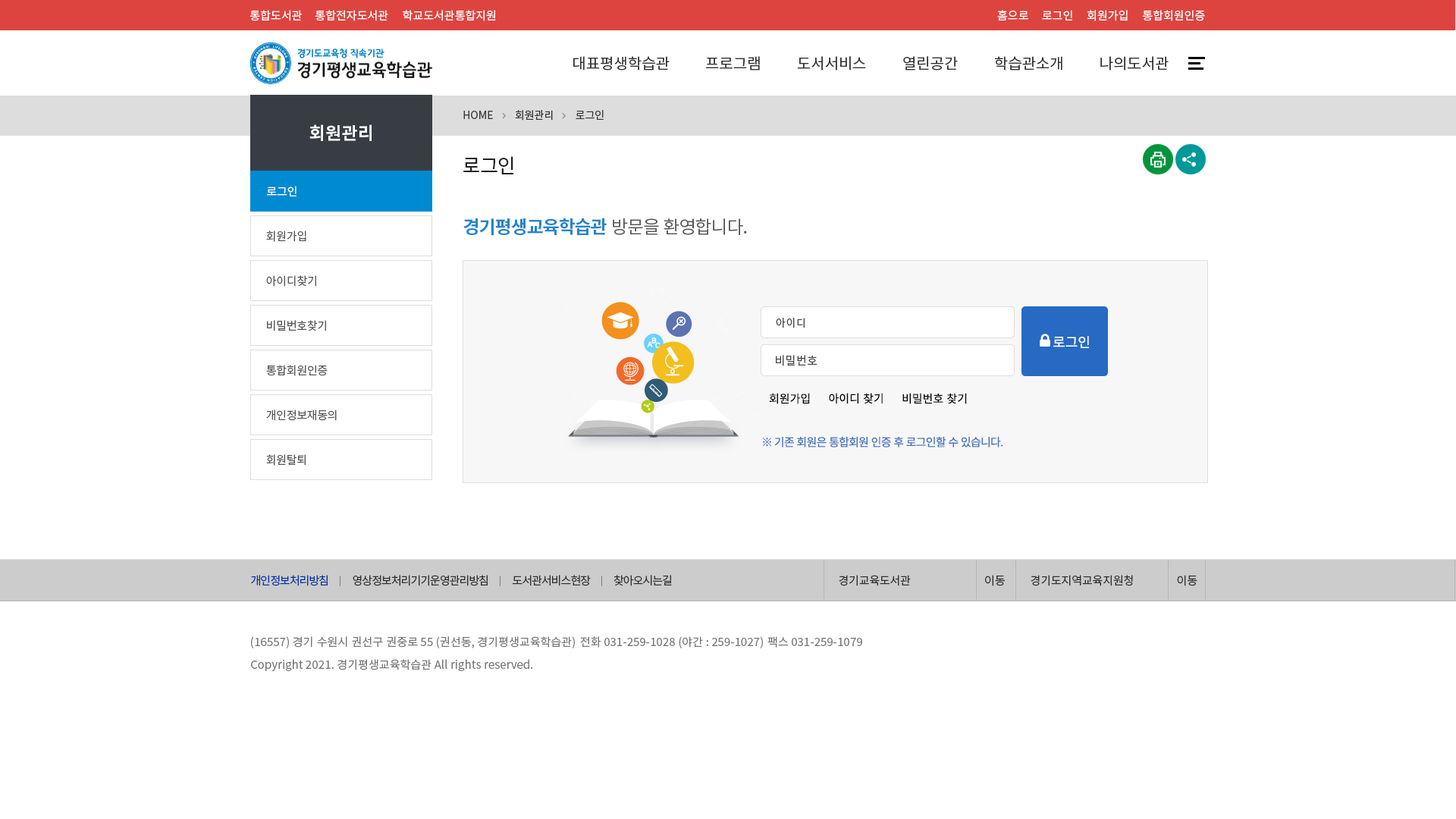
<style>
.page{position:relative;width:1456px;height:819px;background:#ffffff}
.page>*{position:absolute;margin:0}
.t1{font:11.4px "NotoSansKR-Regular";color:#ffffff}
.t2{font:15.2px "NotoSansKR-Regular";color:#333333}
.t3{font:10.6px "NotoSansKR-Regular";letter-spacing:-0.005em;color:#363636}
.t4{font:17.4px "NotoSansKR-Bold";letter-spacing:0.005em;color:#ffffff}
.t5{font:19.7px "NotoSansKR-Regular";letter-spacing:-0.025em;color:#222222}
.t6{font:18.2px "NotoSansKR-Bold";letter-spacing:-0.045em;color:#2586ca}
.t7{font:18.2px "NotoSansKR-Regular";letter-spacing:-0.045em;color:#555555}
.t8{font:11.4px "NotoSansKR-Regular";letter-spacing:-0.01em;color:#555555}
.t9{font:10.6px "NotoSansKR-Regular";letter-spacing:0.045em;color:#464646}
.t10{font:11.4px "NotoSansKR-Regular";letter-spacing:-0.015em;color:#555555}
.t11{font:13.6px "NotoSansKR-Regular";color:#ffffff}
.t12{font:11.4px "NotoSansKR-Regular";letter-spacing:0.025em;color:#464646}
.t13{font:11.4px "NotoSansKR-Regular";color:#000000}
.t14{font:11.4px "NotoSansKR-Regular";letter-spacing:-0.02em;color:#555555}
.t15{font:11.4px "NotoSansKR-Regular";letter-spacing:-0.05em;color:#3f70bc}
.t16{font:11.4px "NotoSansKR-Regular";letter-spacing:-0.065em;color:#0033a8}
.t17{font:9.9px "NotoSansKR-Regular";letter-spacing:-0.065em;color:#888888}
.t18{font:11.4px "NotoSansKR-Regular";letter-spacing:-0.065em;color:#3b3b3b}
.t19{font:11.4px "NotoSansKR-Regular";letter-spacing:-0.015em;color:#3b3b3b}
.t20{font:11.4px "NotoSansKR-Regular";letter-spacing:-0.008em;color:#3b3b3b}
.t21{font:11.4px "NotoSansKR-Regular";letter-spacing:0.005em;color:#777777}
</style>
<div class="page">
<p class="t1" style="left:249px;top:10px;width:53px;height:11px">통합도서관</p>
<p class="t1" style="left:315px;top:10px;width:73px;height:11px">통합전자도서관</p>
<p class="t1" style="left:403px;top:10px;width:93px;height:11px">학교도서관통합지원</p>
<p class="t1" style="left:997px;top:10px;width:31px;height:10px">홈으로</p>
<p class="t1" style="left:1042px;top:10px;width:30px;height:10px">로그인</p>
<p class="t1" style="left:1087px;top:10px;width:41px;height:11px">회원가입</p>
<p class="t1" style="left:1142px;top:10px;width:63px;height:11px">통합회원인증</p>
<p class="t2" style="left:573px;top:56px;width:97px;height:15px">대표평생학습관</p>
<p class="t2" style="left:705px;top:56px;width:55px;height:15px">프로그램</p>
<p class="t2" style="left:797px;top:56px;width:69px;height:15px">도서서비스</p>
<p class="t2" style="left:903px;top:56px;width:55px;height:15px">열린공간</p>
<p class="t2" style="left:995px;top:56px;width:67px;height:15px">학습관소개</p>
<p class="t2" style="left:1100px;top:56px;width:69px;height:15px">나의도서관</p>
<p class="t3" style="left:463px;top:111px;width:30px;height:8px">HOME</p>
<p class="t3" style="left:515px;top:110px;width:38px;height:11px">회원관리</p>
<p class="t3" style="left:576px;top:110px;width:28px;height:10px">로그인</p>
<p class="t4" style="left:309px;top:124px;width:63px;height:17px">회원관리</p>
<p class="t5" style="left:463px;top:156px;width:51px;height:18px">로그인</p>
<p class="t1" style="left:267px;top:186px;width:30px;height:10px">로그인</p>
<p class="t6" style="left:463px;top:218px;width:144px;height:18px">경기평생교육학습관</p>
<p class="t7" style="left:613px;top:218px;width:134px;height:17px">방문을 환영합니다.</p>
<p class="t8" style="left:266px;top:231px;width:40px;height:11px">회원가입</p>
<p class="t8" style="left:266px;top:275px;width:50px;height:12px">아이디찾기</p>
<p class="t9" style="left:776px;top:318px;width:29px;height:10px">아이디</p>
<p class="t10" style="left:267px;top:320px;width:59px;height:11px">비밀번호찾기</p>
<p class="t11" style="left:1053px;top:336px;width:36px;height:12px">로그인</p>
<p class="t10" style="left:266px;top:365px;width:62px;height:11px">통합회원인증</p>
<p class="t12" style="left:776px;top:355px;width:41px;height:11px">비밀번호</p>
<p class="t13" style="left:769px;top:393px;width:41px;height:11px">회원가입</p>
<p class="t13" style="left:829px;top:393px;width:54px;height:11px">아이디 찾기</p>
<p class="t13" style="left:902px;top:393px;width:65px;height:11px">비밀번호 찾기</p>
<p class="t14" style="left:266px;top:409px;width:71px;height:12px">개인정보재동의</p>
<p class="t15" style="left:763px;top:437px;width:240px;height:10px">※ 기존 회원은 통합회원 인증 후 로그인할 수 있습니다.</p>
<p class="t14" style="left:266px;top:454px;width:40px;height:12px">회원탈퇴</p>
<p class="t16" style="left:251px;top:575px;width:77px;height:11px">개인정보처리방침</p>
<p class="t17" style="left:340px;top:576px;width:0px;height:10px">｜</p>
<p class="t18" style="left:353px;top:575px;width:135px;height:11px">영상정보처리기기운영관리방침</p>
<p class="t17" style="left:500px;top:576px;width:0px;height:10px">｜</p>
<p class="t18" style="left:513px;top:575px;width:78px;height:11px">도서관서비스현장</p>
<p class="t17" style="left:601px;top:576px;width:1px;height:10px">｜</p>
<p class="t18" style="left:613px;top:575px;width:59px;height:11px">찾아오시는길</p>
<p class="t19" style="left:839px;top:575px;width:72px;height:11px">경기교육도서관</p>
<p class="t20" style="left:985px;top:575px;width:20px;height:11px">이동</p>
<p class="t20" style="left:1031px;top:575px;width:102px;height:11px">경기도지역교육지원청</p>
<p class="t20" style="left:1177px;top:575px;width:20px;height:11px">이동</p>
<p class="t21" style="left:251px;top:636px;width:324px;height:12px">(16557) 경기 수원시 권선구 권중로 55 (권선동, 경기평생교육학습관)</p>
<p class="t21" style="left:580px;top:636px;width:183px;height:12px">전화 031-259-1028 (야간 : 259-1027)</p>
<p class="t21" style="left:767px;top:636px;width:95px;height:12px">팩스 031-259-1079</p>
<p class="t21" style="left:251px;top:659px;width:282px;height:12px">Copyright 2021. 경기평생교육학습관 All rights reserved.</p>
</div>
